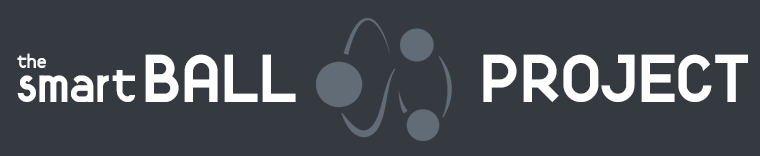
<style>
.page{position:relative;width:760px;height:156px;background:#343a40}
.page>*{position:absolute;margin:0}
.t1{font:17.8px "Fortyfive";color:#ffffff}
.t2{font:68.5px "Fortyfive";color:#ffffff}
.t3{font:46.6px "Fortyfive";color:#ffffff}
</style>
<div class="page">
<p class="t1" style="left:17px;top:53px;width:29px;height:15px">the</p>
<p class="t2" style="left:145px;top:54px;width:151px;height:48px">BALL</p>
<p class="t2" style="left:483px;top:54px;width:265px;height:48px">PROJECT</p>
<p class="t3" style="left:17px;top:70px;width:118px;height:32px">smart</p>
</div>
